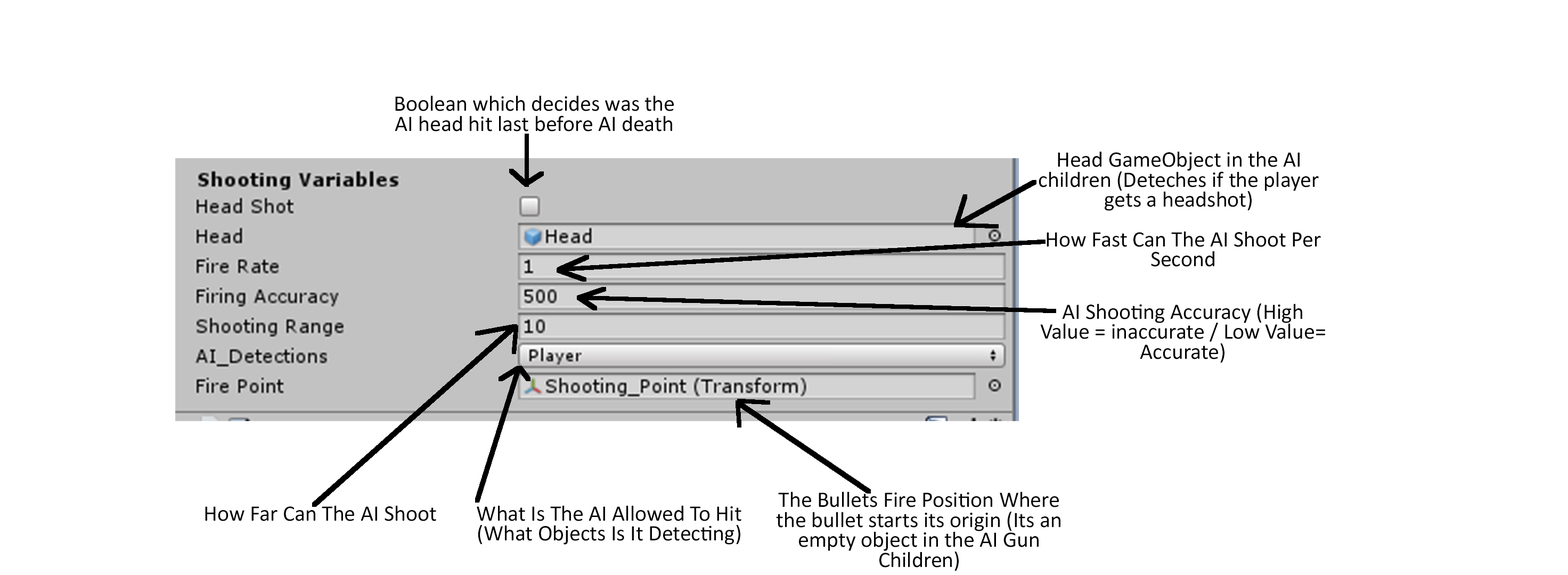
<style>
.page{position:relative;width:1568px;height:575px;background:#ffffff}
.page>*{position:absolute;margin:0}
.t1{font:22.2px "Calibri";color:#000000}
.t2{font:22.2px/20px "Calibri";color:#000000}
</style>
<div class="page">
<p class="t1" style="left:395px;top:95px;width:279px;height:37px">Boolean which decides was the AI head hit last before AI death</p>
<p class="t2" style="left:1039px;top:151px;width:280px;height:60px;text-align:center">Head GameObject in the AI children (Deteches if the player gets a headshot)</p>
<p class="t1" style="left:1047px;top:231px;width:274px;height:36px">How Fast Can The AI Shoot Per Second</p>
<p class="t2" style="left:1040px;top:304px;width:285px;height:59px;text-align:center">AI Shooting Accuracy (High Value = inaccurate / Low Value= Accurate)</p>
<p class="t2" style="left:776px;top:492px;width:284px;height:79px;text-align:center">The Bullets Fire Position Where the bullet starts its origin (Its an empty object in the AI Gun Children)</p>
<p class="t1" style="left:205px;top:505px;width:231px;height:16px">How Far Can The AI Shoot</p>
<p class="t2" style="left:477px;top:505px;width:264px;height:40px;text-align:center">What Is The AI Allowed To Hit (What Objects Is It Detecting)</p>
</div>
